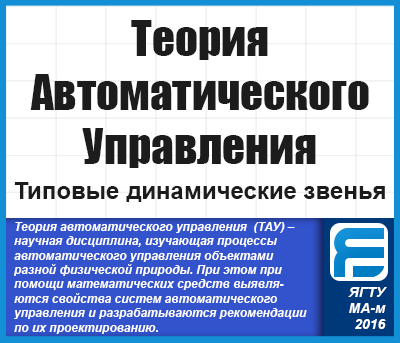
<style>
.page{position:relative;width:400px;height:343px;background:#ffffff}
.page>*{position:absolute;margin:0}
.t1{font:45px "Impact";color:#1c1c1c}
.t2{font:24px "Arial-BoldMT";color:#1c1c1c}
.t3{font:12px "Arial-BoldItalicMT";color:#ffffff}
.t4{font:14px/16px "Arial-BoldItalicMT";color:#ffffff}
</style>
<div class="page">
<p class="t1" style="left:30px;top:20px;width:339px;height:148px;text-align:center">Теория<br>Автоматического<br>Управления</p>
<p class="t2" style="left:14px;top:182px;width:371px;height:20px">Типовые динамические звенья</p>
<p class="t3" style="left:14px;top:222px;width:293px;height:112px">Теория автоматического управления  (ТАУ) – <br>научная дисциплина, изучающая процессы <br>автоматического управления объектами <br>разной физической природы. При этом при <br>помощи математических средств выявля-<br>ются свойства систем автоматического <br>управления и разрабатываются рекомендации <br>по их проектированию.</p>
<p class="t4" style="left:348px;top:287px;width:39px;height:42px;text-align:right">ЯГТУ<br>МА-м<br>2016</p>
</div>
